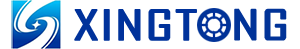
<style>
.page{position:relative;width:300px;height:49px;background:#ffffff}
.page>*{position:absolute;margin:0}
.t1{font:39.6px "AgencyFB-Reg";color:#00329b;font-weight:bold;scale:1.65 1}
.t2{font:39.6px "AgencyFB-Reg";color:#013398;font-weight:bold;scale:1.65 1}
</style>
<div class="page">
<p class="t1" style="left:74px;top:9px;width:123px;height:32px">XINGT</p>
<p class="t2" style="left:234px;top:8px;width:53px;height:33px">NG</p>
</div>
